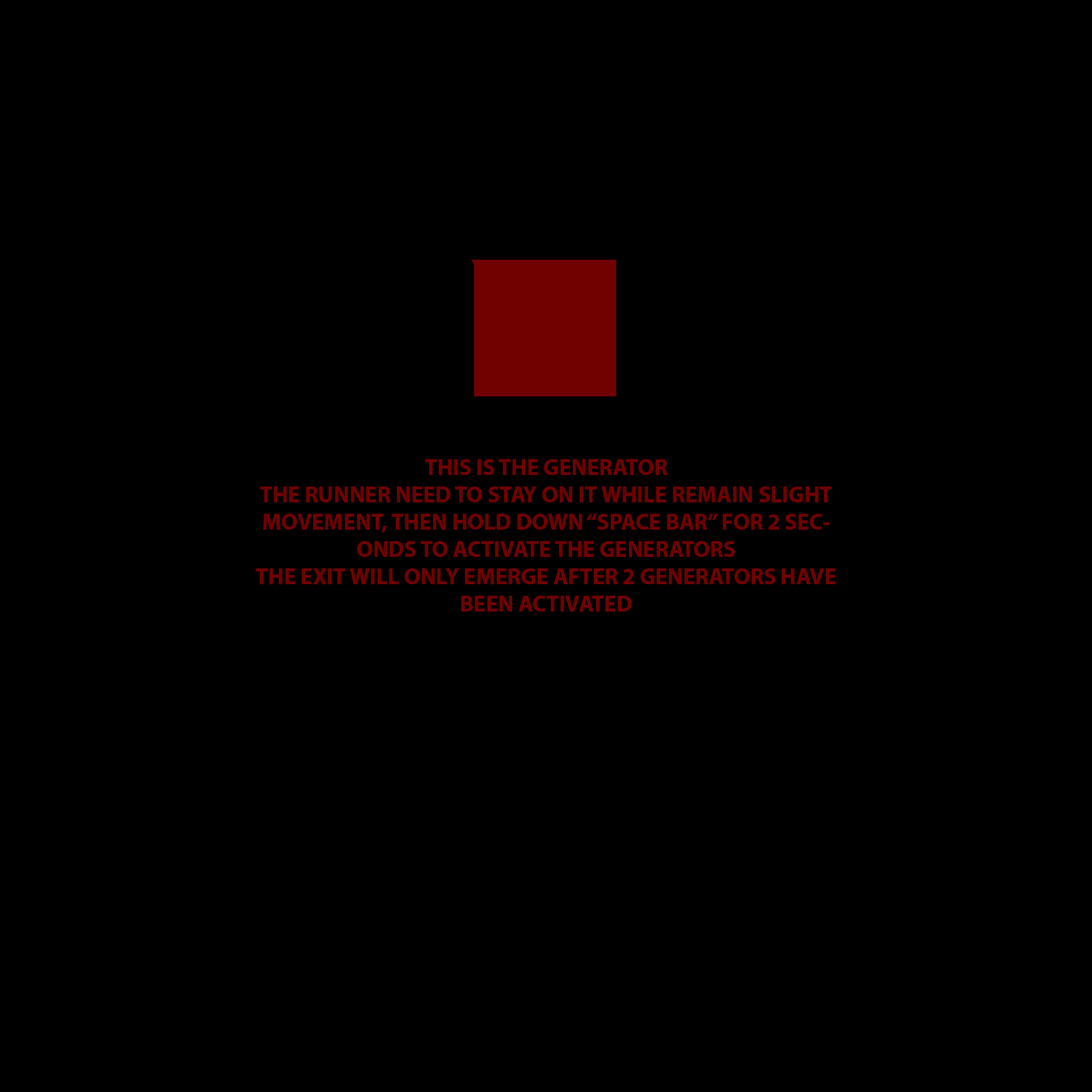
<style>
.page{position:relative;width:1092px;height:1092px;background:#000000}
.page>*{position:absolute;margin:0}
.t1{font:22.7px "MyriadPro-Bold";color:#710000}
</style>
<div class="page">
<p class="t1" style="left:256px;top:459px;width:580px;height:153px;text-align:center">THIS IS THE GENERATOR<br>THE RUNNER NEED TO STAY ON IT WHILE REMAIN SLIGHT MOVEMENT, THEN HOLD DOWN “SPACE BAR” FOR 2 SECONDS TO ACTIVATE THE GENERATORS<br>THE EXIT WILL ONLY EMERGE AFTER 2 GENERATORS HAVE BEEN ACTIVATED</p>
</div>
